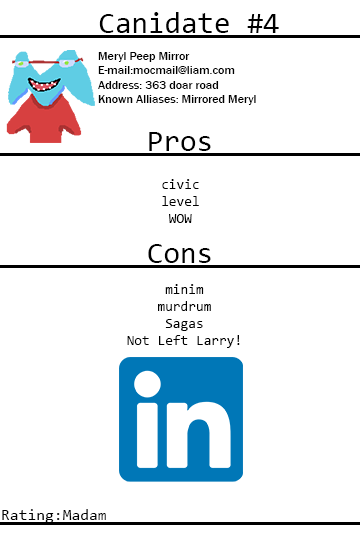
<style>
.page{position:relative;width:360px;height:540px;background:#ffffff}
.page>*{position:absolute;margin:0}
.t1{font:30px "Consolas";color:#000000}
.t2{font:12px "FranklinGothic-Medium";color:#000000}
.t3{font:14px "Consolas";color:#000000}
.t4{font:16px "Consolas";color:#000000}
</style>
<div class="page">
<p class="t1" style="left:99px;top:12px;width:180px;height:21px">Canidate #4</p>
<p class="t2" style="left:98px;top:52px;width:158px;height:53px">Meryl Peep Mirror<br>E-mail:mocmail@liam.com<br>Address: 363 doar road<br>Known Alliases: Mirrored Meryl</p>
<p class="t1" style="left:149px;top:132px;width:62px;height:19px">Pros</p>
<p class="t3" style="left:162px;top:179px;width:37px;height:44px;text-align:center">civic<br>level<br>WOW</p>
<p class="t1" style="left:148px;top:244px;width:63px;height:19px">Cons</p>
<p class="t3" style="left:127px;top:284px;width:113px;height:64px;text-align:center">minim<br>murdrum<br>Sagas<br>Not Left Larry!</p>
<p class="t4" style="left:2px;top:509px;width:104px;height:14px">Rating:Madam</p>
</div>
